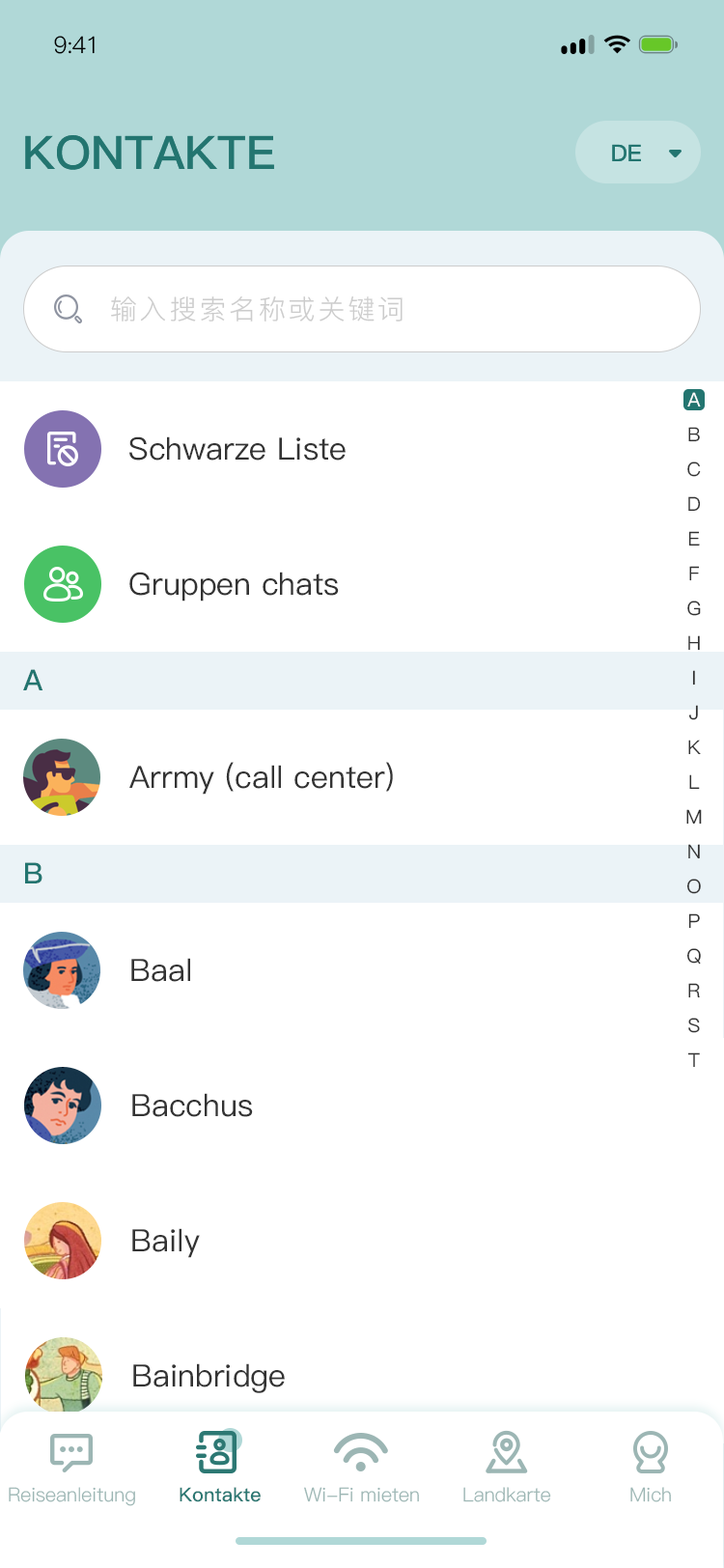
<style>
.page{position:relative;width:724px;height:1568px;background:#ffffff}
.page>*{position:absolute;margin:0}
.t1{font:23.2px "PingFang-SC-Regular";letter-spacing:-0.025em;color:#000000}
.t2{font:46.3px "PingFang-SC-Bold";color:#237570;text-transform:uppercase}
.t3{font:23.2px "PingFang-SC-Bold";color:#237570}
.t4{font:27px "PingFang-SC-Regular";letter-spacing:0.1em;color:#cccccc}
.t5{font:19.3px/34.8px "PingFang-SC-Medium";color:#333333}
.t6{font:19.3px/34.8px "PingFang-SC-Medium";color:#ffffff}
.t7{font:30.9px "PingFang-SC-Medium";color:#333333}
.t8{font:29px "PingFang-SC-Bold";letter-spacing:-0.04em;color:#237570}
.t9{font:19.3px "PingFang-SC-Regular";color:#9cb6b4}
.t10{font:19.3px "PingFang-SC-Bold";color:#2c7873}
</style>
<div class="page">
<p class="t1" style="left:54px;top:36px;width:41px;height:18px">9:41</p>
<p class="t2" style="left:25px;top:135px;width:249px;height:35px">Kontakte</p>
<p class="t3" style="left:612px;top:144px;width:29px;height:17px">DE</p>
<p class="t4" style="left:111px;top:296px;width:292px;height:26px">输入搜索名称或关键词</p>
<p class="t5" style="left:686px;top:392px;width:16px;height:675px;text-align:center"><span class="t6">A<br></span>B<br>C<br>D<br>E<br>F<br>G<br>H<br>I<br>J<br>K<br>L<br>M<br>N<br>O<br>P<br>Q<br>R<br>S<br>T</p>
<p class="t7" style="left:129px;top:436px;width:217px;height:25px">Schwarze Liste</p>
<p class="t7" style="left:129px;top:572px;width:210px;height:30px">Gruppen chats</p>
<p class="t8" style="left:23px;top:669px;width:20px;height:21px">A</p>
<p class="t7" style="left:129px;top:762px;width:264px;height:33px">Arrmy (call center)</p>
<p class="t8" style="left:25px;top:862px;width:17px;height:21px">B</p>
<p class="t7" style="left:131px;top:958px;width:59px;height:24px">Baal</p>
<p class="t7" style="left:132px;top:1093px;width:121px;height:24px">Bacchus</p>
<p class="t7" style="left:132px;top:1228px;width:68px;height:30px">Baily</p>
<p class="t7" style="left:133px;top:1363px;width:152px;height:30px">Bainbridge</p>
<p class="t9" style="left:9px;top:1487px;width:126px;height:19px">Reiseanleitung</p>
<p class="t10" style="left:180px;top:1487px;width:81px;height:15px">Kontakte</p>
<p class="t9" style="left:304px;top:1487px;width:115px;height:15px">Wi-Fi mieten</p>
<p class="t9" style="left:463px;top:1487px;width:88px;height:15px">Landkarte</p>
<p class="t9" style="left:630px;top:1487px;width:41px;height:15px">Mich</p>
</div>
